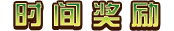
<style>
.page{position:relative;width:174px;height:31px;background:#ffffff}
.page>*{position:absolute;margin:0}
.t1{font:27px "JZhongYi";letter-spacing:0.3em;scale:1.11 1}
</style>
<div class="page">
<p class="t1" style="left:15px;top:2px;width:144px;height:25px">时间奖励</p>
</div>
